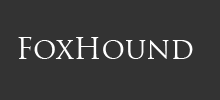
<style>
.page{position:relative;width:220px;height:100px;background:#333333}
.page>*{position:absolute;margin:0}
.t1{font:29px "TrajanPro-Regular";color:#ffffff}
</style>
<div class="page">
<p class="t1" style="left:18px;top:37px;width:175px;height:22px">FoxHound</p>
</div>
